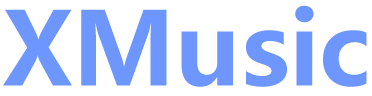
<style>
.page{position:relative;width:372px;height:96px;background:#ffffff}
.page>*{position:absolute;margin:0}
.t1{font:100px "MicrosoftYaHei-Bold";color:#6e96ff}
</style>
<div class="page">
<p class="t1" style="left:3px;top:5px;width:364px;height:82px">XMusic</p>
</div>
